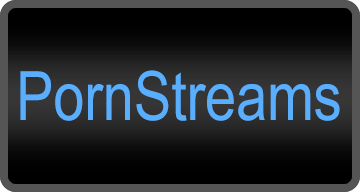
<style>
.page{position:relative;width:360px;height:192px}
.page>*{position:absolute;margin:0}
.t1{font:68px "ArialNarrow";color:#59aefe}
</style>
<div class="page">
<p class="t1" style="left:20px;top:70px;width:320px;height:51px">PornStreams</p>
</div>
